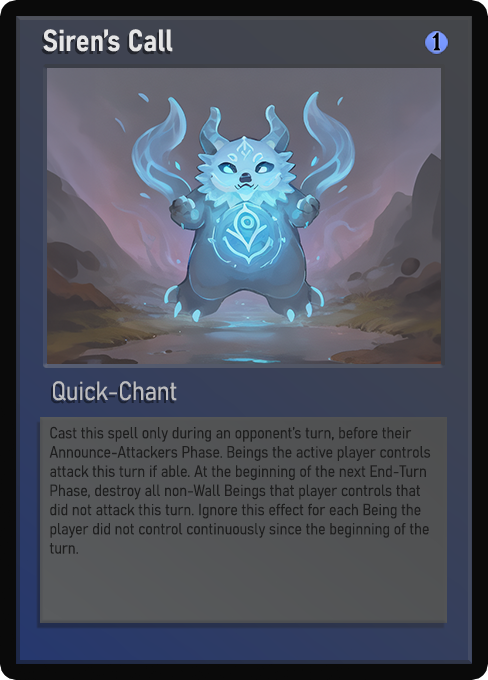
<style>
.page{position:relative;width:488px;height:680px}
.page>*{position:absolute;margin:0}
.t1{font:30px "Bahnschrift-SemiBoldSemiCondensed";color:#f2f2f2;font-weight:bold}
.t2{font:25px "WTRRoycroft";color:#000000;font-weight:bold;scale:1.09 1}
.t3{font:26px "Bahnschrift-LightSemiCondensed";color:#c8c8c8;font-weight:bold}
.t4{font:16px "Bahnschrift-LightSemiCondensed";color:#1e1e1e;font-weight:bold}
</style>
<div class="page">
<p class="t1" style="left:43px;top:29px;width:130px;height:23px;opacity:0.9">Siren’s Call</p>
<p class="t2" style="left:432px;top:32px;width:9px;height:19px">1</p>
<p class="t3" style="left:53px;top:381px;width:124px;height:20px;opacity:0.9">Quick-Chant</p>
<p class="t4" style="left:49px;top:426px;width:382px;height:128px">Cast this spell only during an opponent’s turn, before their Announce-Attackers Phase. Beings the active player controls attack this turn if able. At the beginning of the next End-Turn Phase, destroy all non-Wall Beings that player controls that did not attack this turn. Ignore this effect for each Being the player did not control continuously since the beginning of the turn.</p>
</div>
